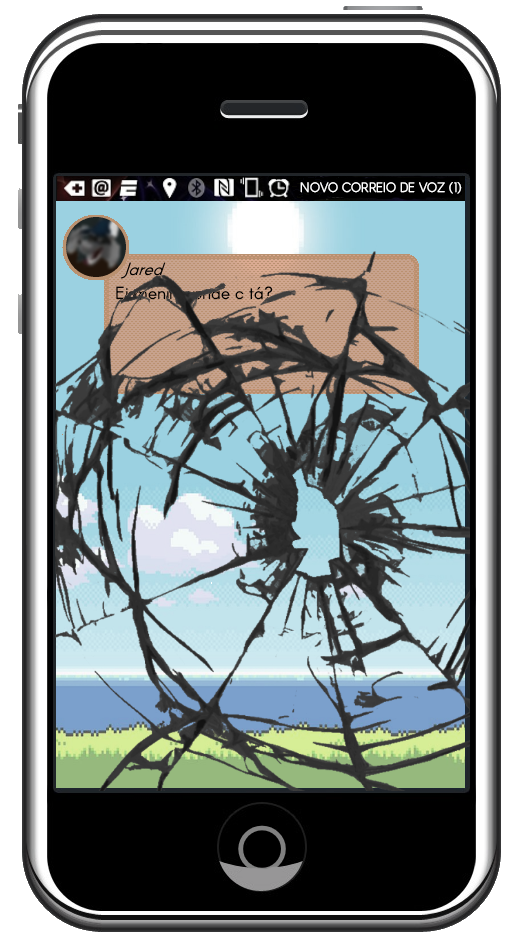
<style>
.page{position:relative;width:515px;height:943px;background:#000000}
.page>*{position:absolute;margin:0}
.t1{font:13.3px "Arcon-Regular";color:#ffffff;scale:0.92 1}
.t2{font:17.3px "Arcon-Regular";color:#000000}
</style>
<div class="page">
<p class="t1" style="left:300px;top:182px;width:162px;height:12px">NOVO CORREIO DE VOZ (1)</p>
<p class="t2" style="left:116px;top:286px;width:157px;height:14px">Ei menino onde c tá?</p>
</div>
